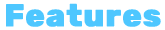
<style>
.page{position:relative;width:165px;height:30px;background:#ffffff}
.page>*{position:absolute;margin:0}
.t1{font:31.4px "Rubik-ExtraBold";letter-spacing:0.02em;color:#4ec7ff;font-weight:bold}
</style>
<div class="page">
<p class="t1" style="left:6px;top:3px;width:155px;height:24px">Features</p>
</div>
